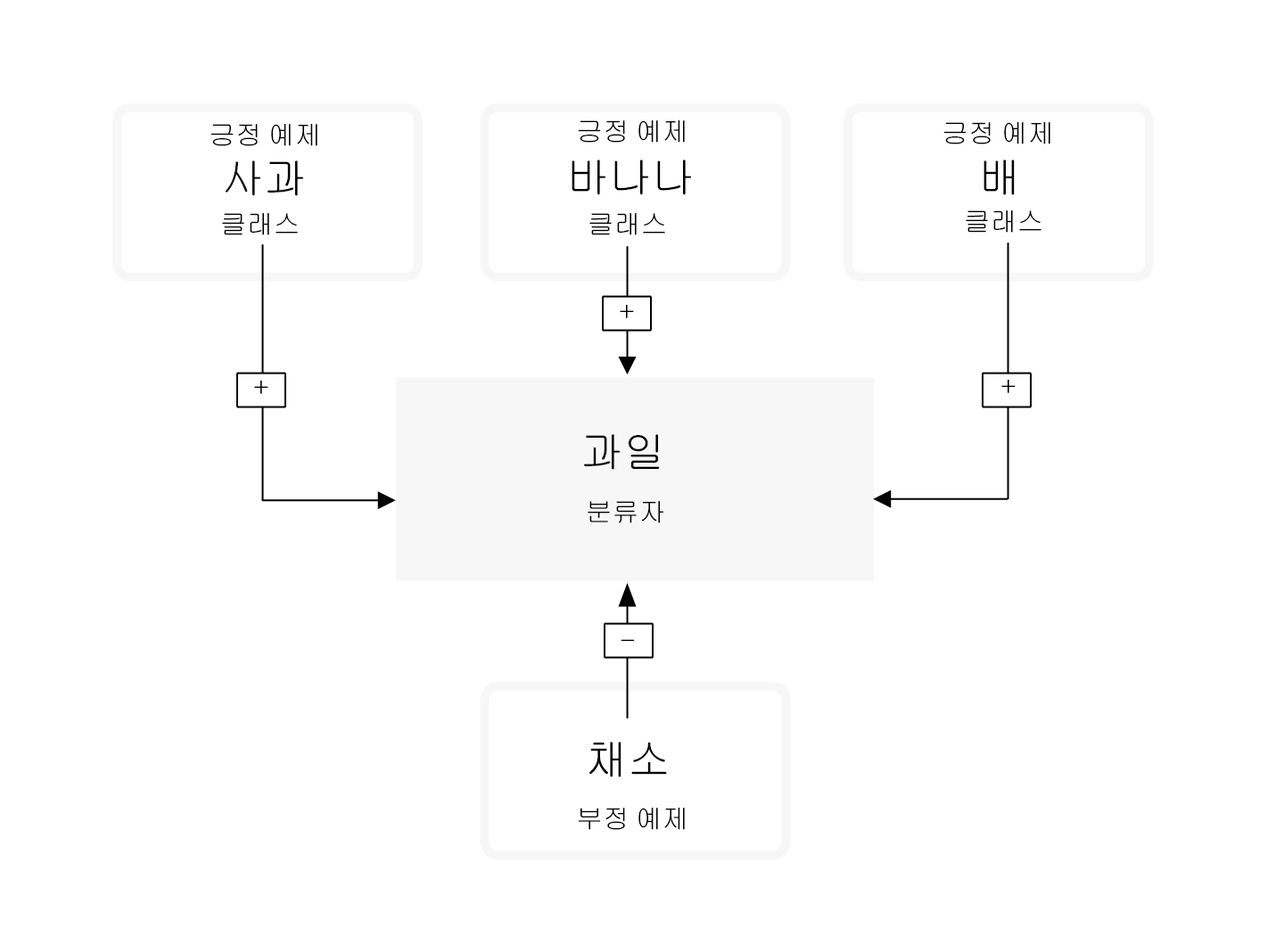
<style>
.page{position:relative;width:1284px;height:928px;background:#ffffff}
.page>*{position:absolute;margin:0}
.t1{font:26.8px "Gulim";color:#000000}
.t2{font:42.8px "Gulim";color:#000000}
</style>
<div class="page">
<p class="t1" style="left:210px;top:124px;width:108px;height:22px">긍정 예제</p>
<p class="t1" style="left:578px;top:120px;width:107px;height:23px">긍정 예제</p>
<p class="t1" style="left:944px;top:122px;width:107px;height:22px">긍정 예제</p>
<p class="t2" style="left:226px;top:161px;width:77px;height:35px">사과</p>
<p class="t2" style="left:572px;top:160px;width:119px;height:35px">바나나</p>
<p class="t2" style="left:984px;top:160px;width:31px;height:35px">배</p>
<p class="t1" style="left:222px;top:213px;width:76px;height:22px">클래스</p>
<p class="t1" style="left:590px;top:213px;width:75px;height:22px">클래스</p>
<p class="t1" style="left:966px;top:210px;width:76px;height:23px">클래스</p>
<p class="t1" style="left:620px;top:304px;width:14px;height:14px">+</p>
<p class="t1" style="left:254px;top:380px;width:14px;height:14px">+</p>
<p class="t1" style="left:1002px;top:379px;width:14px;height:14px">+</p>
<p class="t2" style="left:584px;top:434px;width:76px;height:36px">과일</p>
<p class="t1" style="left:588px;top:501px;width:76px;height:23px">분류자</p>
<p class="t1" style="left:621px;top:639px;width:14px;height:2px">-</p>
<p class="t2" style="left:590px;top:742px;width:77px;height:36px">채소</p>
<p class="t1" style="left:578px;top:808px;width:107px;height:22px">부정 예제</p>
</div>
